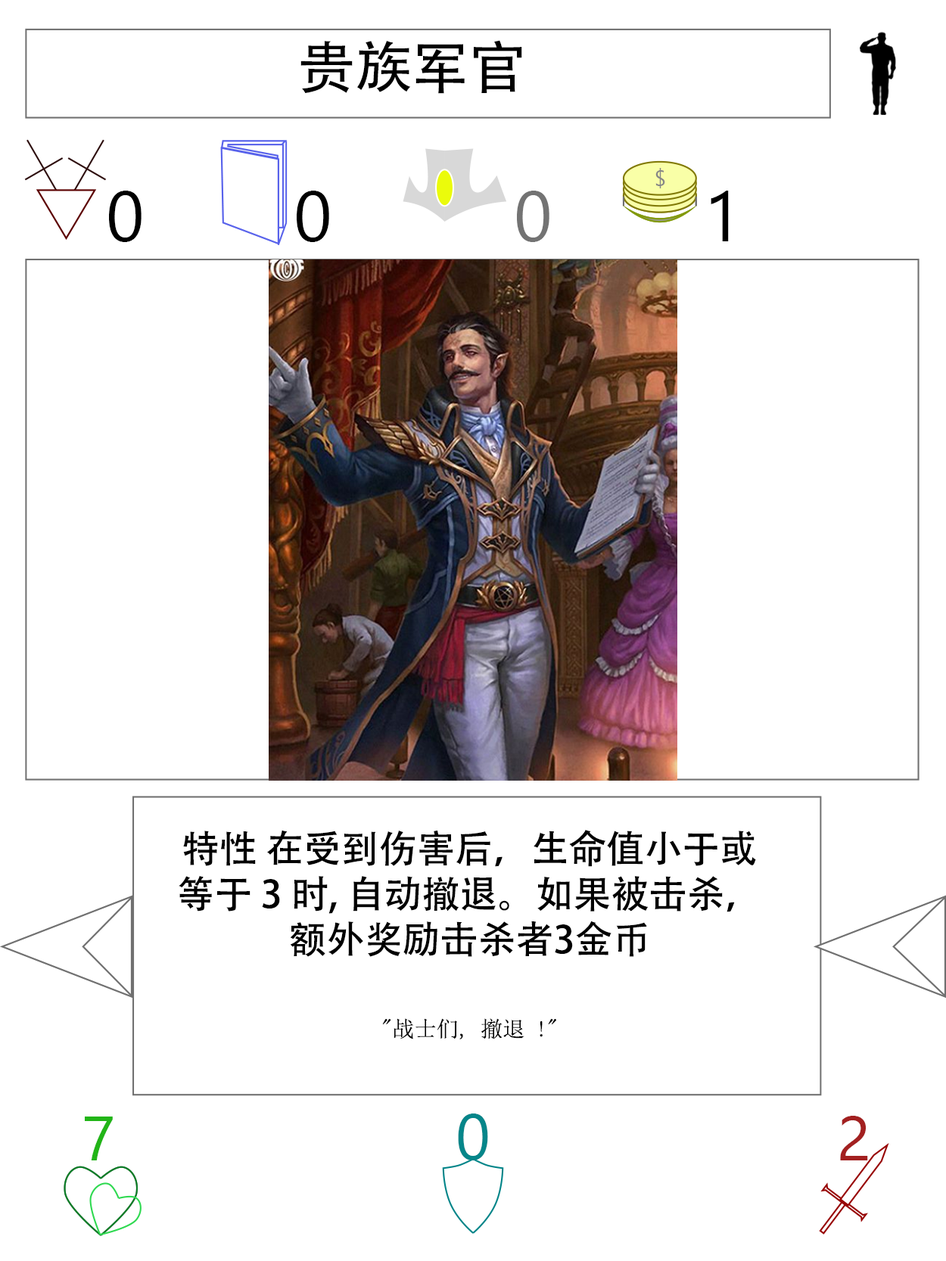
<style>
.page{position:relative;width:946px;height:1261px;background:#ffffff}
.page>*{position:absolute;margin:0}
.t1{font:56.7px "AdobeHeitiStd-Regular";color:#000000}
.t2{font:70.9px "SegoeUI";color:#000000}
.t3{font:70.9px "SegoeUI";color:#737373}
.t4{font:37.8px "AdobeHeitiStd-Regular";color:#000000}
.t5{font:22.1px "NSimSun";color:#000000}
.t6{font:63px "SegoeUI";color:#22b518}
.t7{font:64.6px "SegoeUI";color:#05868a}
.t8{font:63px "SegoeUI";color:#a32020}
</style>
<div class="page">
<p class="t1" style="left:300px;top:40px;width:222px;height:54px">贵族军官</p>
<p class="t2" style="left:109px;top:191px;width:32px;height:51px">0</p>
<p class="t2" style="left:297px;top:191px;width:32px;height:51px">0</p>
<p class="t3" style="left:517px;top:191px;width:32px;height:51px">0</p>
<p class="t2" style="left:710px;top:191px;width:18px;height:50px">1</p>
<p class="t4" style="left:179px;top:830px;width:577px;height:209px;text-align:center">特性 在受到伤害后，生命值小于或等于 3 时, 自动撤退。如果被击杀，额外奖励击杀者3金币<br><br><span class="t5">"战士们, 撤退 !"</span></p>
<p class="t6" style="left:85px;top:1117px;width:28px;height:43px">7</p>
<p class="t7" style="left:458px;top:1114px;width:30px;height:46px">0</p>
<p class="t8" style="left:840px;top:1116px;width:28px;height:44px">2</p>
</div>
